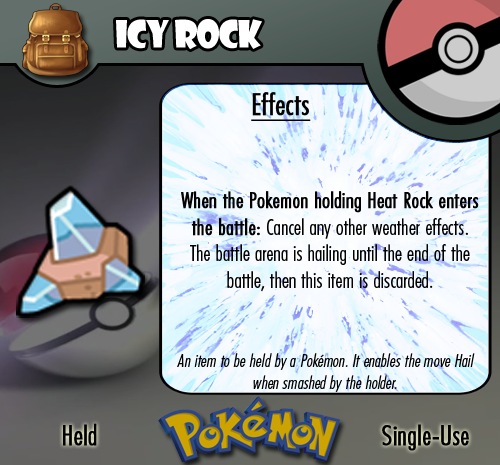
<style>
.page{position:relative;width:500px;height:465px}
.page>*{position:absolute;margin:0}
.t1{font:36.7px "ShowcardGothic-Reg";letter-spacing:-0.025em;color:#ffffff;scale:0.91 1}
.t2{font:22.2px "FuturaCondensedBQ-Light";color:#010101}
.t3{font:27.8px "FuturaCondensedBQ-Light";color:#010101;font-weight:bold}
.t4{font:30.6px "FuturaCondensedBQ-Light";color:#010101;font-weight:bold;text-decoration:underline}
.t5{font:22.2px "FuturaCondensedBQ-Light";color:#010101;font-weight:bold}
.t6{font:18.1px "FuturaCondensedBQ-Light";color:#010101;font-style:italic}
</style>
<div class="page">
<p class="t1" style="left:116px;top:19px;width:146px;height:31px">Icy Rock</p>
<p class="t2" style="left:181px;top:92px;width:298px;height:200px"><span class="t3">  </span><span class="t4">Effects<br><br><br></span><span class="t5">When the Pokemon holding Heat Rock enters the battle: </span>Cancel any other weather effects. The battle arena is hailing until the end of the battle, then this item is discarded.</p>
<p class="t6" style="left:177px;top:353px;width:298px;height:39px;text-align:center">An item to be held by a Pokémon. It enables the move Hail when smashed by the holder.</p>
<p class="t3" style="left:63px;top:423px;width:34px;height:23px">Held</p>
<p class="t3" style="left:382px;top:424px;width:87px;height:27px">Single-Use</p>
</div>
